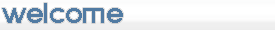
<style>
.page{position:relative;width:275px;height:30px}
.page>*{position:absolute;margin:0}
.t1{font:26px "Zeroes";color:#517ba3}
</style>
<div class="page">
<p class="t1" style="left:2px;top:3px;width:121px;height:20px">welcome</p>
</div>
